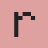
<style>
.page{position:relative;width:48px;height:48px;background:#dfa0a0}
.page>*{position:absolute;margin:0}
.t1{font:66.7px "RSEHandwritingPi";letter-spacing:-0.01em;color:#222222}
</style>
<div class="page">
<p class="t1" style="left:14px;top:12px;width:22px;height:25px">r</p>
</div>
